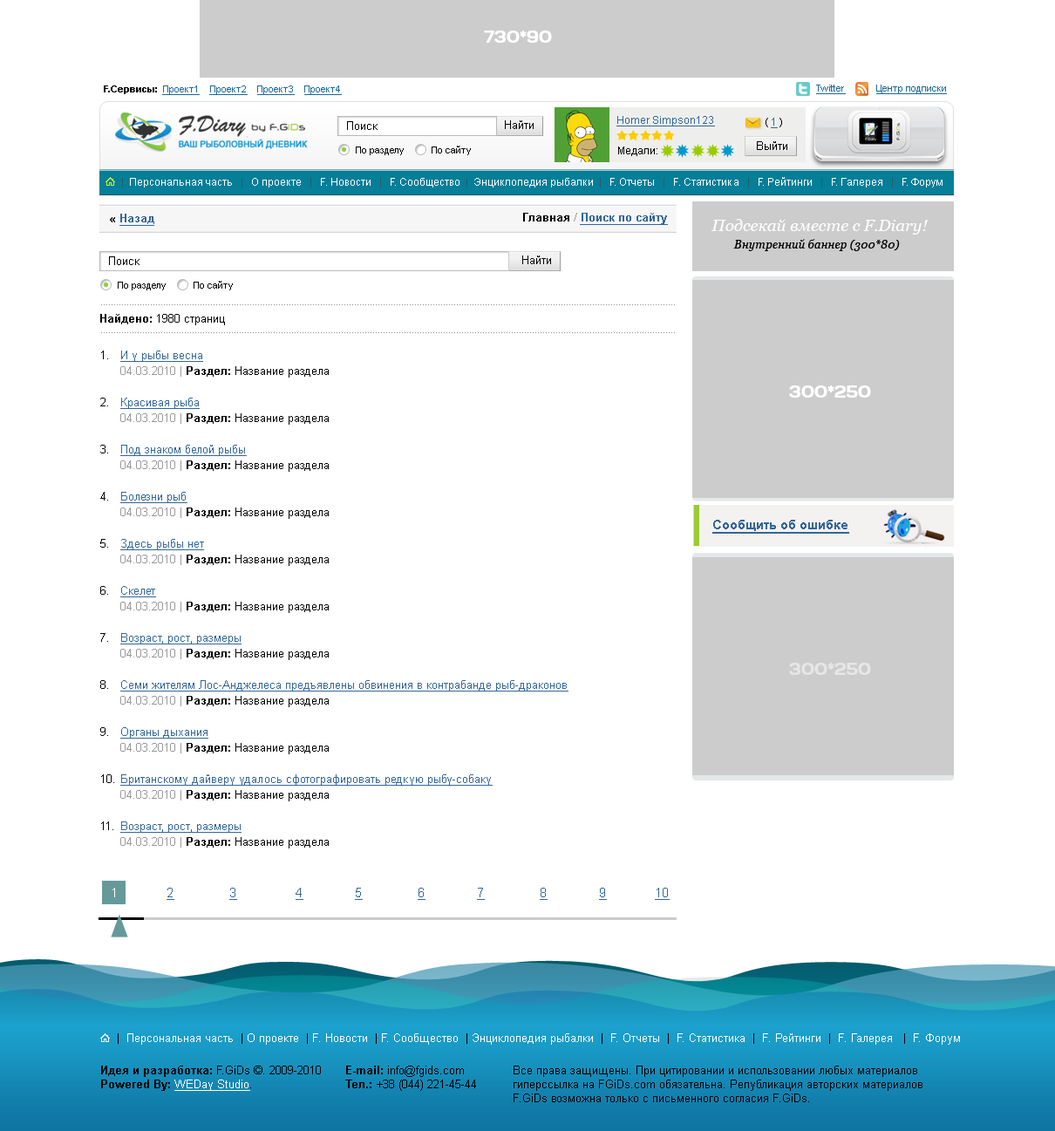
<style>
.page{position:relative;width:1055px;height:1131px;background:#ffffff}
.page>*{position:absolute;margin:0}
.t1{font:16.6px "Days";color:#ffffff}
.t2{font:9.6px "ArialMT";color:#1c699a;text-decoration:underline}
.t3{font:9.6px "Arial-BoldMT";color:#000000}
.t4{font:11.3px "ArialMT";color:#000000}
.t5{font:10.5px "ArialMT";color:#336699;text-decoration:underline}
.t6{font:10.5px "ArialMT";color:#000000}
.t7{font:9.6px "ArialMT";color:#000000}
.t8{font:10.5px "ArialMT";color:#ffffff}
.t9{font:10.5px "ArialMT";color:#2d5a63}
.t10{font:11.3px "Arial-BoldMT";color:#336699;text-decoration:underline}
.t11{font:11.3px "Arial-BoldMT";color:#000000}
.t12{font:11.3px "Arial-BoldMT";color:#999999}
.t13{font:16.5px "Georgia-Italic";color:#fefefe}
.t14{font:11.7px/17.2px "Georgia-Italic";color:#000000}
.t15{font:11.3px/15.7px "ArialMT";color:#000000}
.t16{font:11.3px/15.7px "ArialMT";color:#336699;text-decoration:underline}
.t17{font:11.3px/15.7px "ArialMT";color:#999999}
.t18{font:11.3px/15.7px "Arial-BoldMT";color:#000000}
.t19{font:13.1px "Arial-BoldMT";color:#336699;text-decoration:underline}
.t20{font:16.6px "Days";color:#e6e6e6}
.t21{font:13.1px "ArialMT";color:#336699;text-decoration:underline}
.t22{font:13.1px "ArialMT";color:#ffffff}
.t23{font:11.3px "ArialMT";color:#ffffff}
.t24{font:11.3px "ArialMT";color:#ffffff;text-decoration:underline}
</style>
<div class="page">
<p class="t1" style="left:484px;top:31px;width:68px;height:12px">730*90</p>
<p class="t2" style="left:104px;top:85px;width:238px;height:10px"><span class="t3">F.Сервисы:  </span>Проект1    Проект2    Проект3    Проект4</p>
<p class="t2" style="left:816px;top:85px;width:30px;height:9px">Twitter</p>
<p class="t2" style="left:876px;top:85px;width:71px;height:9px">Центр подписки</p>
<p class="t4" style="left:347px;top:121px;width:30px;height:9px">Поиск</p>
<p class="t4" style="left:505px;top:120px;width:28px;height:9px">Найти</p>
<p class="t5" style="left:616px;top:116px;width:99px;height:10px">Homer Simpson123</p>
<p class="t6" style="left:765px;top:118px;width:17px;height:10px">( <span class="t5">1</span> )</p>
<p class="t7" style="left:356px;top:146px;width:48px;height:9px">По разделу</p>
<p class="t7" style="left:431px;top:146px;width:40px;height:9px">По сайту</p>
<p class="t6" style="left:618px;top:146px;width:39px;height:10px">Медали:</p>
<p class="t4" style="left:757px;top:141px;width:30px;height:9px">Выйти</p>
<p class="t8" style="left:122px;top:177px;width:820px;height:10px"><span class="t9">|</span>  Персональная часть   <span class="t9">| </span>  О проекте   <span class="t9">|</span>   F. Новости   <span class="t9">|</span>   F. Сообщество <span class="t9"> |</span>  Энциклопедия рыбалки <span class="t9"> |</span>   F. Отчеты   <span class="t9">| </span>  F. Статистика   <span class="t9">|</span>   F. Рейтинги   <span class="t9">| </span>  F. Галерея   <span class="t9">|</span>   F. Форум</p>
<p class="t10" style="left:110px;top:214px;width:44px;height:12px"><span class="t11"> « </span>Назад</p>
<p class="t10" style="left:523px;top:213px;width:145px;height:12px"><span class="t11"> Главная </span><span class="t12">/ </span>Поиск по сайту</p>
<p class="t13" style="left:711px;top:219px;width:216px;height:32px;text-align:center">Подсекай вместе с F.Diary!<br><span class="t14">Внутренний баннер (300*80)</span></p>
<p class="t4" style="left:109px;top:256px;width:30px;height:9px">Поиск</p>
<p class="t4" style="left:522px;top:255px;width:29px;height:9px">Найти</p>
<p class="t7" style="left:118px;top:282px;width:48px;height:8px">По разделу</p>
<p class="t7" style="left:194px;top:281px;width:39px;height:9px">По сайту</p>
<p class="t4" style="left:100px;top:314px;width:125px;height:11px"><span class="t11">Найдено: </span>1980 страниц</p>
<p class="t15" style="left:100px;top:350px;width:14px;height:480px">1.<br><br><br>2.<br><br><br>3.<br><br><br>4.<br><br><br>5.<br><br><br>6.<br><br><br>7.<br><br><br>8.<br><br><br>9.<br><br><br>10.<br><br><br>11.</p>
<p class="t16" style="left:120px;top:350px;width:448px;height:498px">И у рыбы весна<br><span class="t17">04.03.2010 | </span><span class="t18">Раздел:</span><span class="t15"> Название раздела<br><br></span>Красивая рыба<br><span class="t17">04.03.2010 | </span><span class="t18">Раздел:</span><span class="t15"> Название раздела<br><br></span>Под знаком белой рыбы<br><span class="t17">04.03.2010 | </span><span class="t18">Раздел:</span><span class="t15"> Название раздела<br><br></span>Болезни рыб<br><span class="t17">04.03.2010 | </span><span class="t18">Раздел:</span><span class="t15"> Название раздела<br><br></span>Здесь рыбы нет<br><span class="t17">04.03.2010 | </span><span class="t18">Раздел:</span><span class="t15"> Название раздела<br><br></span>Скелет<br><span class="t17">04.03.2010 | </span><span class="t18">Раздел:</span><span class="t15"> Название раздела<br><br></span>Возраст, рост, размеры<br><span class="t17">04.03.2010 | </span><span class="t18">Раздел:</span><span class="t15"> Название раздела<br><br></span>Семи жителям Лос-Анджелеса предъявлены обвинения в контрабанде рыб-драконов<br><span class="t17">04.03.2010 | </span><span class="t18">Раздел:</span><span class="t15"> Название раздела<br></span><br>Органы дыхания<br><span class="t17">04.03.2010 | </span><span class="t18">Раздел:</span><span class="t15"> Название раздела<br></span><br>Британскому дайверу удалось сфотографировать редкую рыбу-собаку<br><span class="t17">04.03.2010 | </span><span class="t18">Раздел:</span><span class="t15"> Название раздела<br></span><br>Возраст, рост, размеры<br><span class="t17">04.03.2010 | </span><span class="t18">Раздел:</span><span class="t15"> Название раздела</span></p>
<p class="t1" style="left:789px;top:385px;width:82px;height:12px">300*250</p>
<p class="t19" style="left:712px;top:520px;width:137px;height:13px">Сообщить об ошибке</p>
<p class="t20" style="left:789px;top:662px;width:82px;height:13px">300*250</p>
<p class="t21" style="left:112px;top:887px;width:557px;height:13px"><span class="t22">1              </span>2                3                 4               5                6               7                8               9              10</p>
<p class="t23" style="left:118px;top:1033px;width:842px;height:11px"><span class="t4">|</span>  Персональная часть <span class="t4"> |</span> О проекте  <span class="t4">|</span> F. Новости  <span class="t4">|</span> F. Сообщество  <span class="t4">|</span> Энциклопедия рыбалки  <span class="t4">|</span>  F. Отчеты  <span class="t4">|</span>  F. Статистика  <span class="t4">|</span>  F. Рейтинги  <span class="t4">|</span>  F. Галерея   <span class="t4">|</span>  F. Форум</p>
<p class="t4" style="left:101px;top:1065px;width:220px;height:25px"><span class="t11">Идея и разработка:</span> F.GiDs ©. 2009-2010<br><span class="t11">Powered By: </span><span class="t24">WEDay Studio</span>.</p>
<p class="t4" style="left:345px;top:1065px;width:131px;height:25px"><span class="t11">E-mail: </span>info@fgids.com<br><span class="t11">Тел.:</span> +38 (044) 221-45-44</p>
<p class="t4" style="left:513px;top:1065px;width:409px;height:37px">Все права защищены. При цитировании и использовании любых материалов гиперссылка на FGiDs.com обязательна. Републикация авторских материалов F.GiDs возможна только с письменного согласия F.GiDs.</p>
</div>
